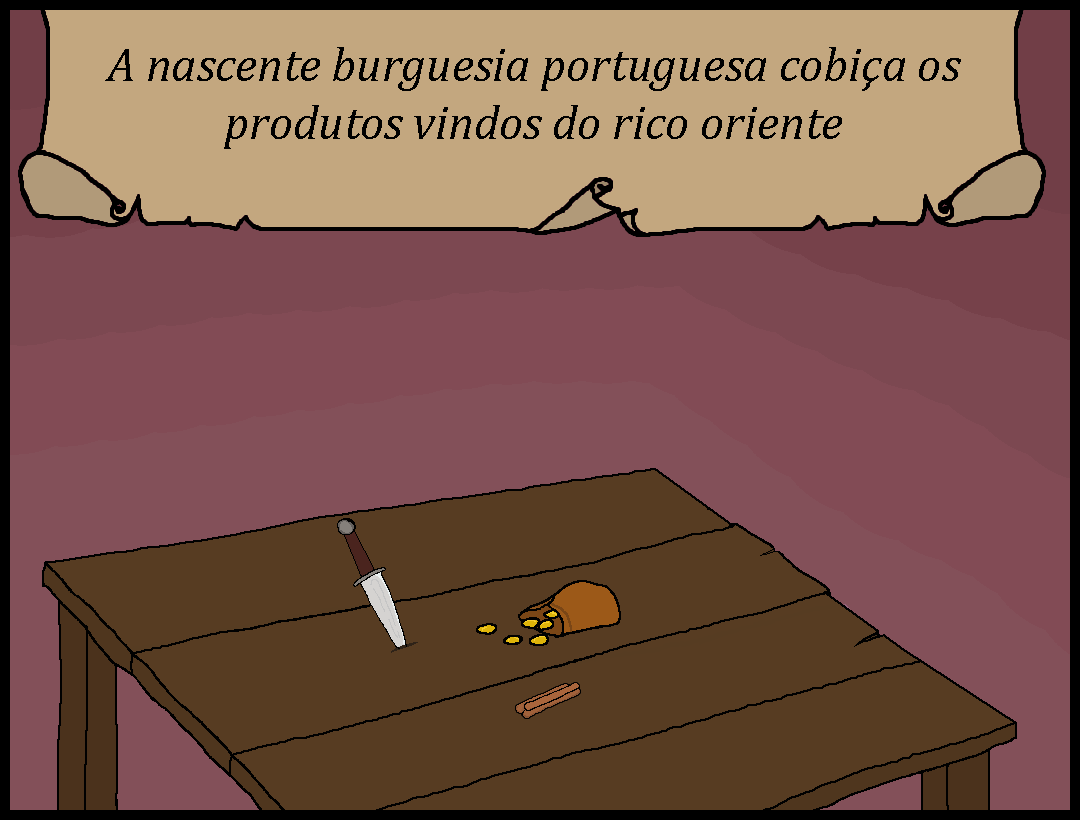
<style>
.page{position:relative;width:1080px;height:820px;background:#573c22}
.page>*{position:absolute;margin:0}
.t1{font:48px "Cambria-Italic";color:#000000}
</style>
<div class="page">
<p class="t1" style="left:105px;top:47px;width:856px;height:102px;text-align:center">A nascente burguesia portuguesa cobiça os produtos vindos do rico oriente</p>
</div>
